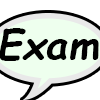
<style>
.page{position:relative;width:100px;height:100px;background:#eeffee}
.page>*{position:absolute;margin:0}
.t1{font:40px "ComicSansMS-BoldItalic";color:#000000}
</style>
<div class="page">
<p class="t1" style="left:0px;top:28px;width:99px;height:33px">Exam</p>
</div>
